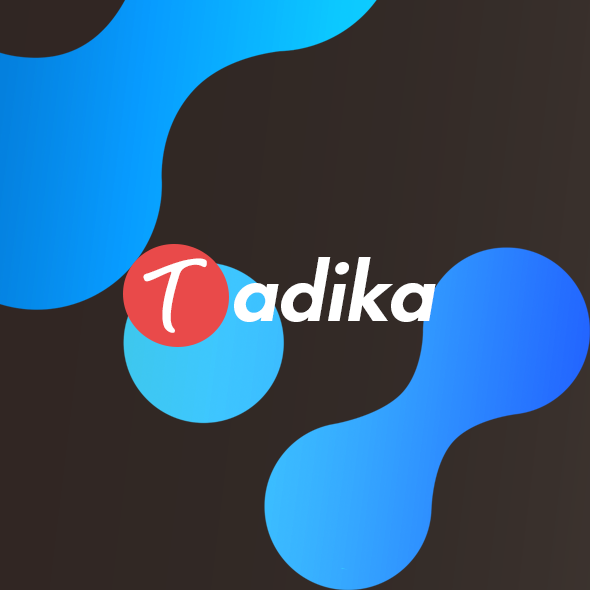
<style>
.page{position:relative;width:590px;height:590px}
.page>*{position:absolute;margin:0}
.t1{font:75.6px "FuturaStd-HeavyOblique";color:#ffffff;scale:1.09 1}
.t2{font:86.7px "GuthenBlootsPersonalUse";color:#ffffff;scale:1.08 1}
</style>
<div class="page">
<p class="t1" style="left:234px;top:257px;width:202px;height:65px">adika</p>
<p class="t2" style="left:143px;top:258px;width:64px;height:75px">T</p>
</div>
